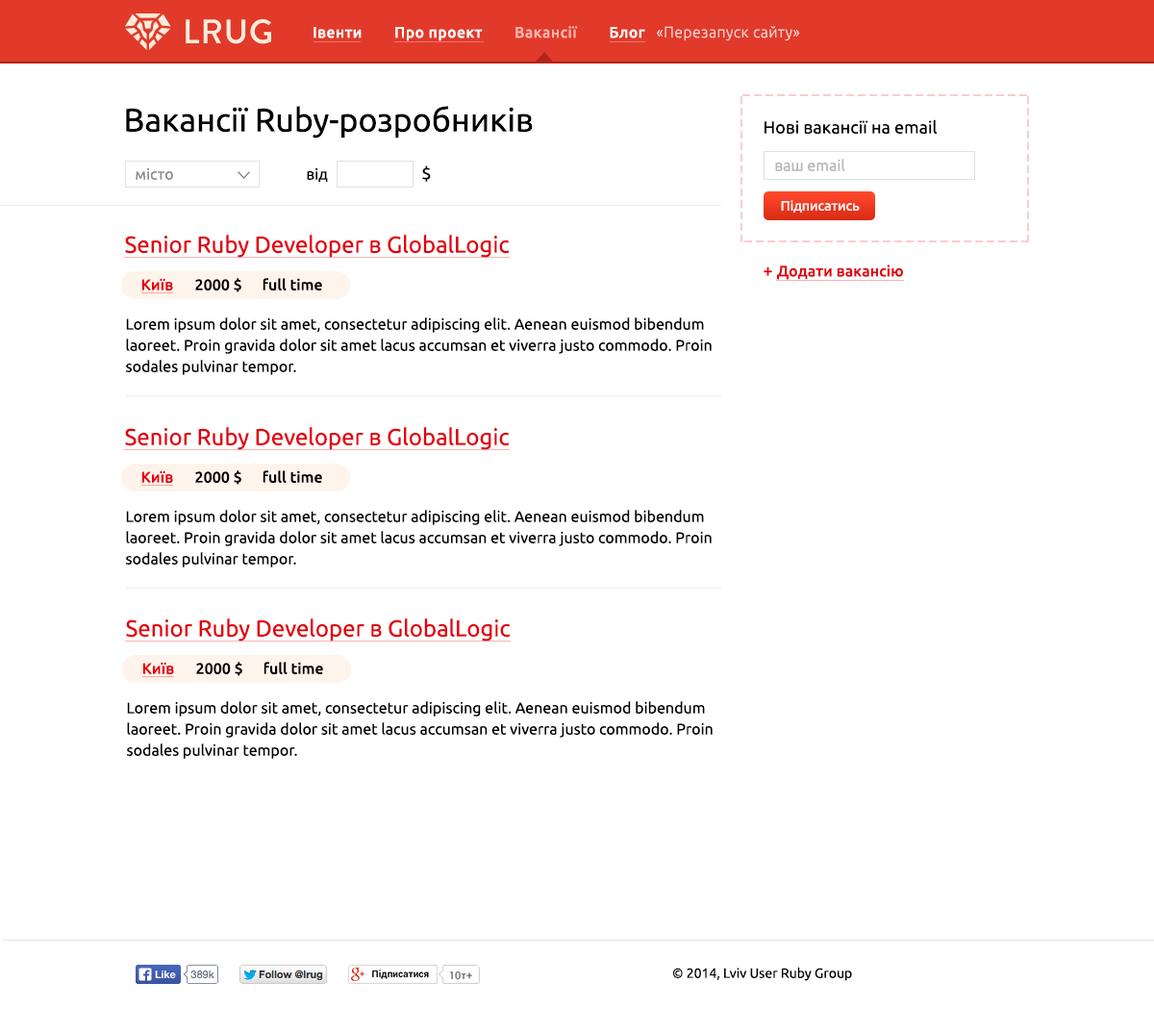
<style>
.page{position:relative;width:1154px;height:1033px;background:#ffffff}
.page>*{position:absolute;margin:0}
.t1{font:15.4px "Ubuntu-Medium";letter-spacing:0.034em;color:#ffffff}
.t2{font:15.4px "Ubuntu-Medium";letter-spacing:0.034em;color:#ffb4ad}
.t3{font:15.4px "Ubuntu-Light";letter-spacing:0.034em;color:#f6d1cf}
.t4{font:32.7px "Ubuntu";color:#000000}
.t5{font:17.3px "Ubuntu";color:#000000}
.t6{font:15.4px "Ubuntu";color:#b8b8b8}
.t7{font:15.4px "Ubuntu";color:#8d8d8d}
.t8{font:15.4px "Ubuntu";color:#000000}
.t9{font:13.5px "Ubuntu";color:#ffffff}
.t10{font:23.1px "Ubuntu";color:#e3000e}
.t11{font:15.4px "Ubuntu-Medium";color:#e3000e}
.t12{font:17.3px "Ubuntu-Medium";color:#e3000e}
.t13{font:15.4px "Ubuntu-Medium";color:#000000}
.t14{font:15.4px/21.2px "Ubuntu";color:#000000}
.t15{font:13.5px "Ubuntu";color:#000000}
</style>
<div class="page">
<p class="t1" style="left:314px;top:26px;width:331px;height:15px">Івенти        Про проект        <span class="t2">Вакансії        </span>Блог</p>
<p class="t3" style="left:657px;top:26px;width:143px;height:15px">«Перезапуск сайту»</p>
<p class="t4" style="left:126px;top:106px;width:407px;height:33px">Вакансії Ruby-розробників</p>
<p class="t5" style="left:765px;top:119px;width:172px;height:15px">Нові вакансії на email</p>
<p class="t6" style="left:775px;top:159px;width:70px;height:12px">ваш email</p>
<p class="t7" style="left:136px;top:167px;width:37px;height:13px">місто</p>
<p class="t8" style="left:307px;top:167px;width:21px;height:15px">від</p>
<p class="t5" style="left:422px;top:165px;width:9px;height:17px">$</p>
<p class="t9" style="left:781px;top:200px;width:79px;height:13px">Підписатись</p>
<p class="t10" style="left:125px;top:235px;width:385px;height:23px">Senior Ruby Developer в GlobalLogic</p>
<p class="t11" style="left:764px;top:265px;width:139px;height:15px"><span class="t12">+ </span>Додати вакансію</p>
<p class="t11" style="left:141px;top:278px;width:32px;height:12px">Київ</p>
<p class="t13" style="left:195px;top:278px;width:46px;height:14px">2000 $</p>
<p class="t13" style="left:263px;top:278px;width:59px;height:12px">full time</p>
<p class="t14" style="left:126px;top:317px;width:586px;height:58px">Lorem ipsum dolor sit amet, consectetur adipiscing elit. Aenean euismod bibendum laoreet. Proin gravida dolor sit amet lacus accumsan et viverra justo commodo. Proin sodales pulvinar tempor.</p>
<p class="t10" style="left:125px;top:427px;width:385px;height:23px">Senior Ruby Developer в GlobalLogic</p>
<p class="t11" style="left:141px;top:470px;width:32px;height:13px">Київ</p>
<p class="t13" style="left:195px;top:470px;width:46px;height:15px">2000 $</p>
<p class="t13" style="left:263px;top:470px;width:59px;height:13px">full time</p>
<p class="t14" style="left:126px;top:510px;width:586px;height:58px">Lorem ipsum dolor sit amet, consectetur adipiscing elit. Aenean euismod bibendum laoreet. Proin gravida dolor sit amet lacus accumsan et viverra justo commodo. Proin sodales pulvinar tempor.</p>
<p class="t10" style="left:126px;top:618px;width:385px;height:24px">Senior Ruby Developer в GlobalLogic</p>
<p class="t11" style="left:142px;top:662px;width:32px;height:12px">Київ</p>
<p class="t13" style="left:196px;top:662px;width:46px;height:14px">2000 $</p>
<p class="t13" style="left:264px;top:662px;width:59px;height:12px">full time</p>
<p class="t14" style="left:127px;top:701px;width:586px;height:58px">Lorem ipsum dolor sit amet, consectetur adipiscing elit. Aenean euismod bibendum laoreet. Proin gravida dolor sit amet lacus accumsan et viverra justo commodo. Proin sodales pulvinar tempor.</p>
<p class="t15" style="left:672px;top:967px;width:180px;height:14px">© 2014, Lviv User Ruby Group</p>
</div>
